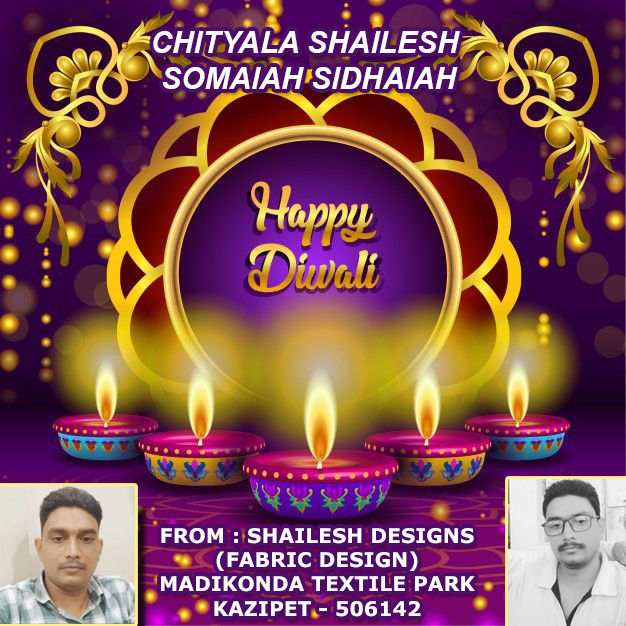
<style>
.page{position:relative;width:626px;height:626px}
.page>*{position:absolute;margin:0}
.t1{font:30px "Arial-BoldItalicMT";color:#ffffff}
.t2{font:20.3px "Verdana-Bold";color:#ffffff}
</style>
<div class="page">
<p class="t1" style="left:153px;top:31px;width:307px;height:58px;text-align:center">CHITYALA SHAILESH <br>SOMAIAH SIDHAIAH</p>
<p class="t2" style="left:161px;top:528px;width:314px;height:89px;text-align:center">FROM : SHAILESH DESIGNS<br>(FABRIC DESIGN)<br>MADIKONDA TEXTILE PARK<br>KAZIPET - 506142</p>
</div>
